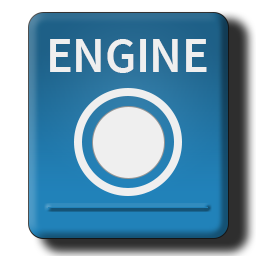
<style>
.page{position:relative;width:256px;height:256px}
.page>*{position:absolute;margin:0}
.t1{font:50px "SourceSansPro-SemiBold";letter-spacing:-0.01em;color:#efefef}
</style>
<div class="page">
<p class="t1" style="left:50px;top:39px;width:157px;height:34px">ENGINE</p>
</div>
